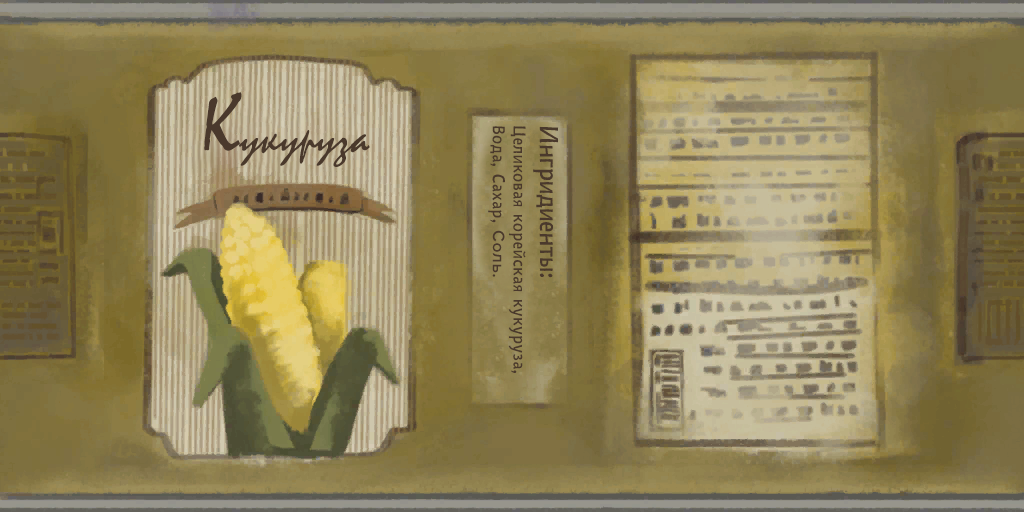
<style>
.page{position:relative;width:1024px;height:512px}
.page>*{position:absolute;margin:0}
.t1{font:47.8px "Mistral";color:#4a392c}
.t2{font:84.5px "Mistral";color:#4a392c}
.t3{font:17.2px/10.7px "NazhdakW08-Regular";letter-spacing:0.04em;color:#4a392c}
.t4{font:17.2px/10.7px "ProximaNova-Semibold";letter-spacing:0.04em;color:#4a392c}
.t5{font:25.7px "NazhdakW08-Regular";color:#4a392c}
</style>
<div class="page">
<p class="t1" style="left:204px;top:92px;width:166px;height:75px"><span class="t2">К</span>укуруза</p>
<p class="t3" style="left:488px;top:126px;width:38px;height:247px;rotate:90deg">Целиковая корейская кукуруза, <br>Вода, Сахар, <span class="t4">Соль.</span></p>
<p class="t5" style="left:533px;top:126px;width:26px;height:152px;rotate:90deg">Ингридиенты:</p>
</div>
